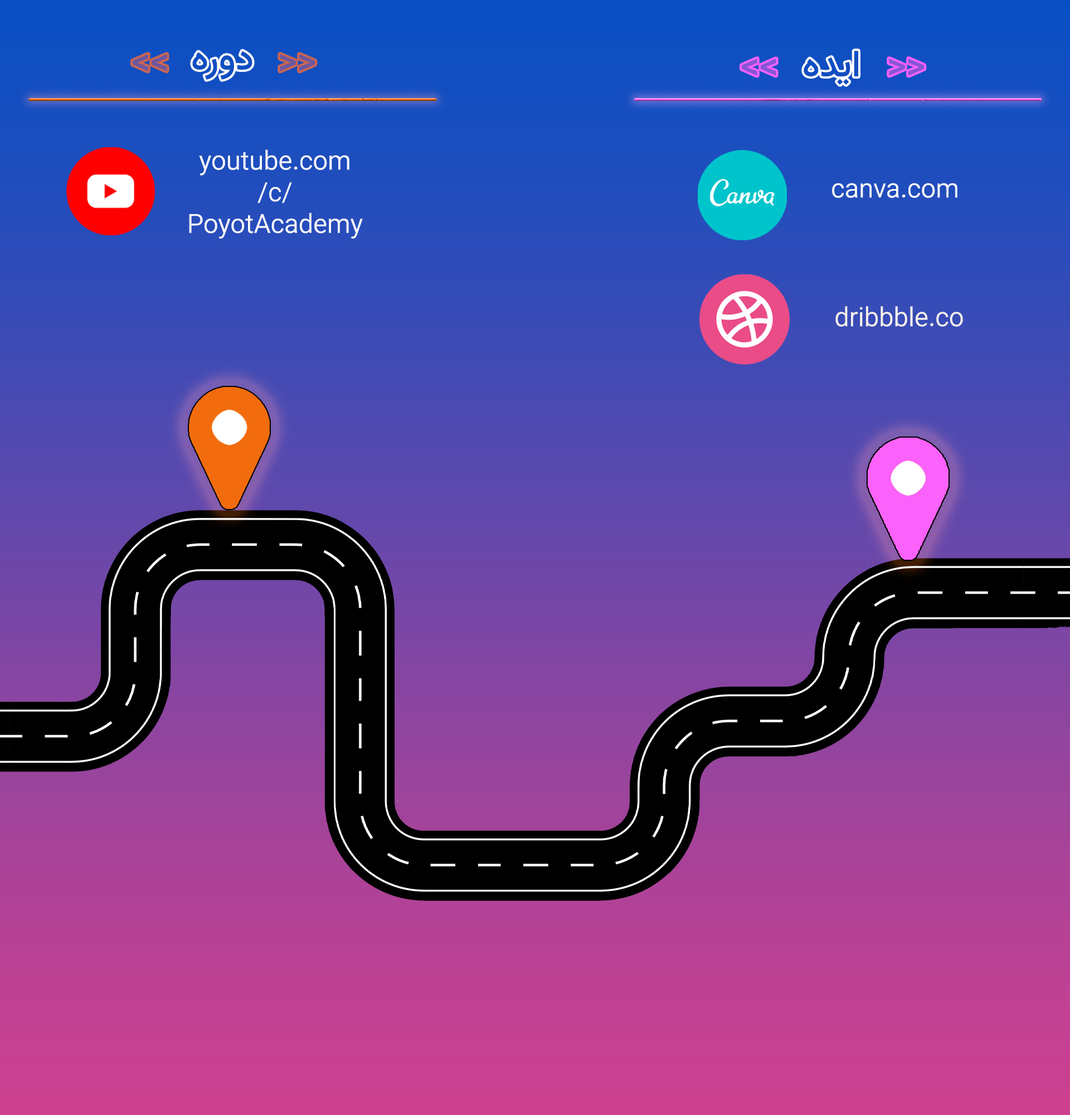
<style>
.page{position:relative;width:1070px;height:1115px}
.page>*{position:absolute;margin:0}
.t1{font:37.2px "Vazirmatn-Medium";color:#104ec1}
.t2{font:37.2px "Vazirmatn-Medium";color:#6d579e}
.t3{font:26.3px "Vazirmatn-Light";color:#fbfbfb}
.t4{font:26.4px "Vazirmatn-Light";color:#fcfcfc}
.t5{font:26.4px "Vazirmatn-Light";color:#f7f1ed}
</style>
<div class="page">
<p class="t1" style="left:192px;top:51px;width:60px;height:29px">دوره</p>
<p class="t2" style="left:133px;top:54px;width:34px;height:17px">&lt;&lt;</p>
<p class="t2" style="left:280px;top:54px;width:35px;height:17px">&gt;&gt;</p>
<p class="t3" style="left:189px;top:149px;width:174px;height:90px;text-align:center">youtube.com<br>/c/<br>PoyotAcademy</p>
<p class="t4" style="left:832px;top:183px;width:125px;height:15px">canva.com</p>
<p class="t5" style="left:835px;top:306px;width:128px;height:21px">dribbble.com</p>
</div>
